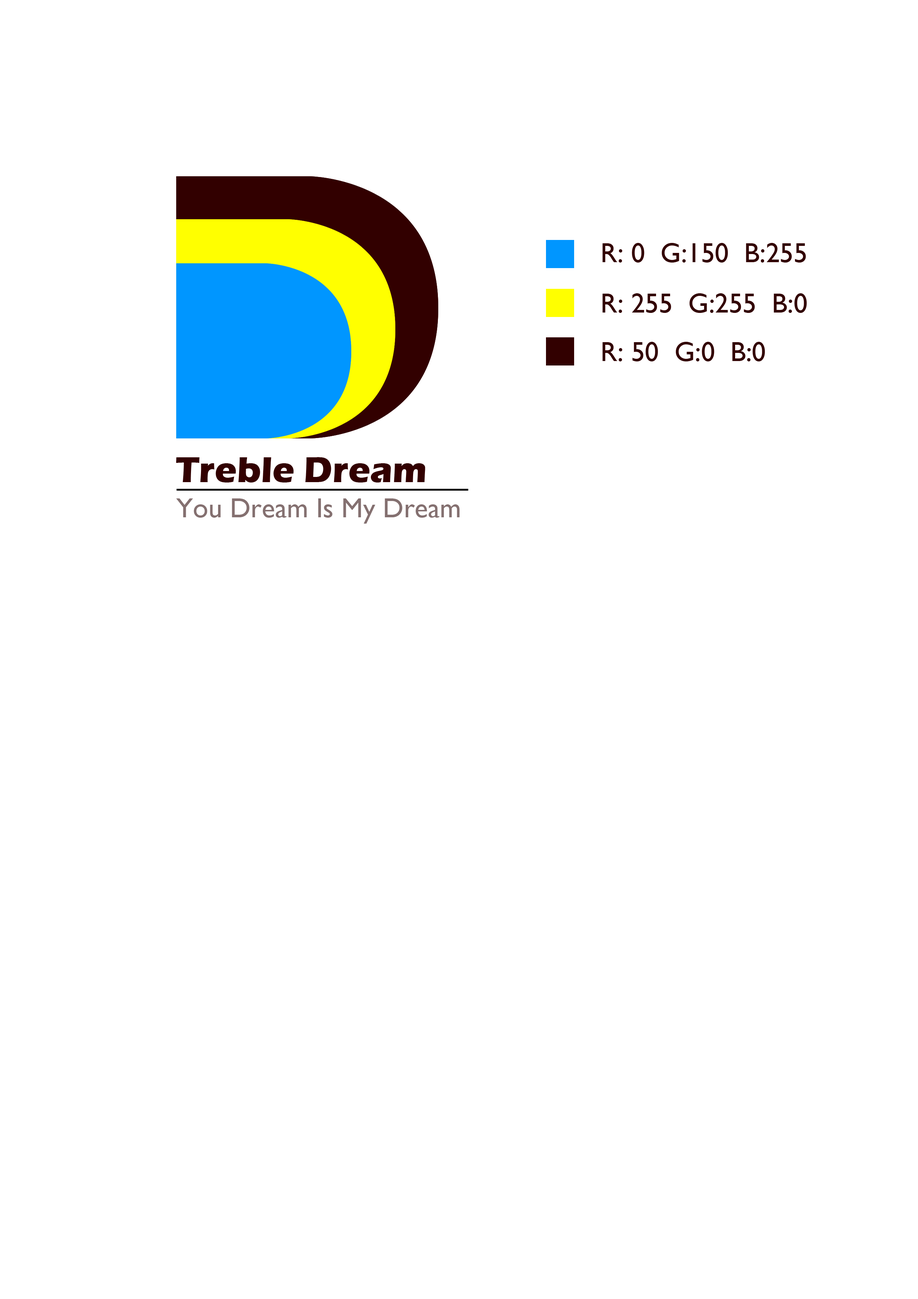
<style>
.page{position:relative;width:918px;height:1299px;background:#ffffff}
.page>*{position:absolute;margin:0}
.t1{font:27.8px "GillSansMT";color:#320000}
.t2{font:37px "ErasITC-Bold";color:#320000}
.t3{font:27.8px "GillSansMT";color:#847171}
</style>
<div class="page">
<p class="t1" style="left:602px;top:243px;width:204px;height:19px">R: 0  G:150  B:255</p>
<p class="t1" style="left:602px;top:293px;width:205px;height:20px">R: 255  G:255  B:0</p>
<p class="t1" style="left:602px;top:342px;width:163px;height:19px">R: 50  G:0  B:0</p>
<p class="t2" style="left:176px;top:457px;width:249px;height:25px">Treble Dream</p>
<p class="t3" style="left:176px;top:498px;width:284px;height:25px">You Dream Is My Dream</p>
</div>
